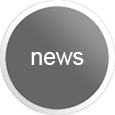
<style>
.page{position:relative;width:115px;height:115px;background:#666666}
.page>*{position:absolute;margin:0}
.t1{font:23px "ArialMT";color:#ffffff}
</style>
<div class="page">
<p class="t1" style="left:31px;top:52px;width:53px;height:13px">news</p>
</div>
